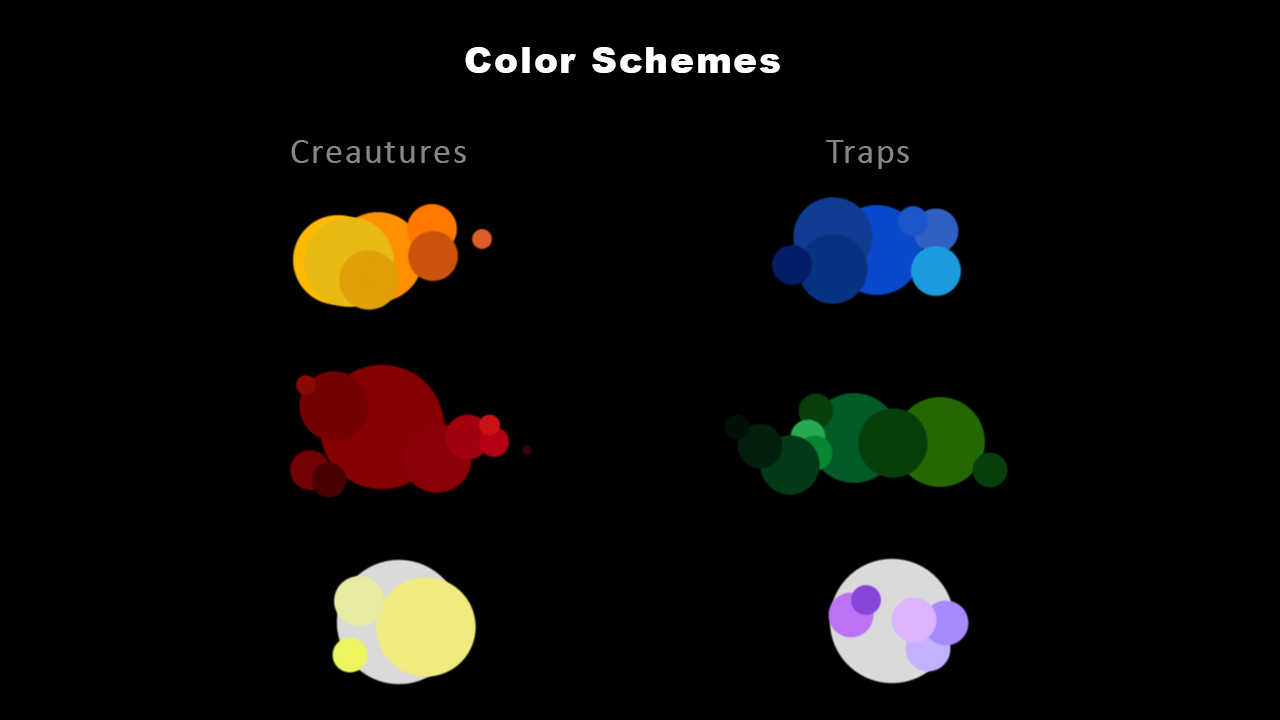
<style>
.page{position:relative;width:1280px;height:720px;background:#000000}
.page>*{position:absolute;margin:0}
.t1{font:36px "Arial-Black";letter-spacing:0.05em;color:#ffffff}
.t2{font:36px "Calibri";letter-spacing:0.05em;color:#868686}
</style>
<div class="page">
<p class="t1" style="left:465px;top:47px;width:315px;height:26px">Color Schemes</p>
<p class="t2" style="left:291px;top:140px;width:618px;height:29px">Creautures                                    Traps</p>
</div>
